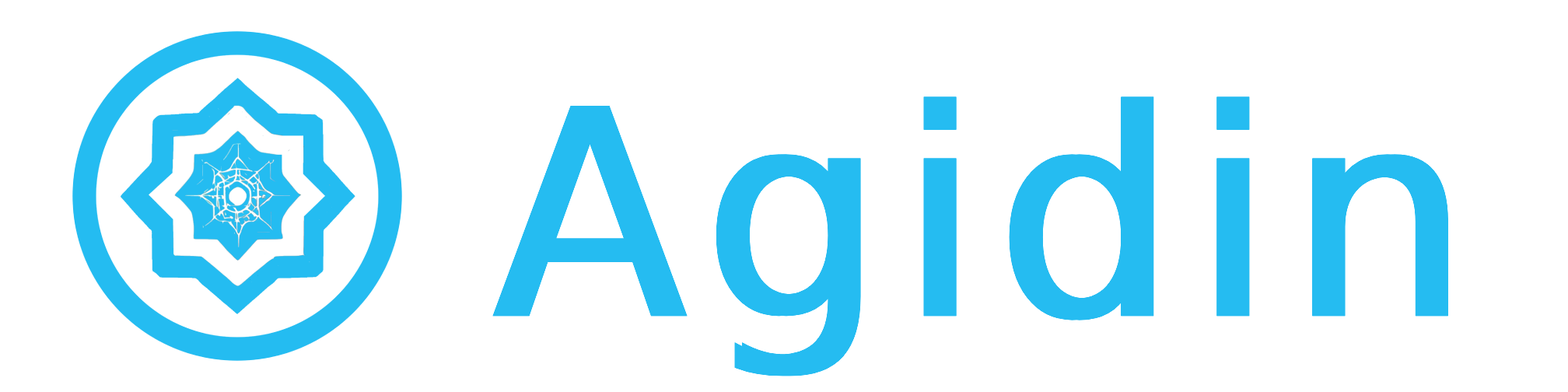
<style>
.page{position:relative;width:1568px;height:392px;background:#ffffff}
.page>*{position:absolute;margin:0}
.t1{font:288.4px "DejaVuSans";letter-spacing:0.04em;color:#25bcf1;font-weight:bold}
</style>
<div class="page">
<p class="t1" style="left:492px;top:96px;width:956px;height:280px">Agidin</p>
</div>
